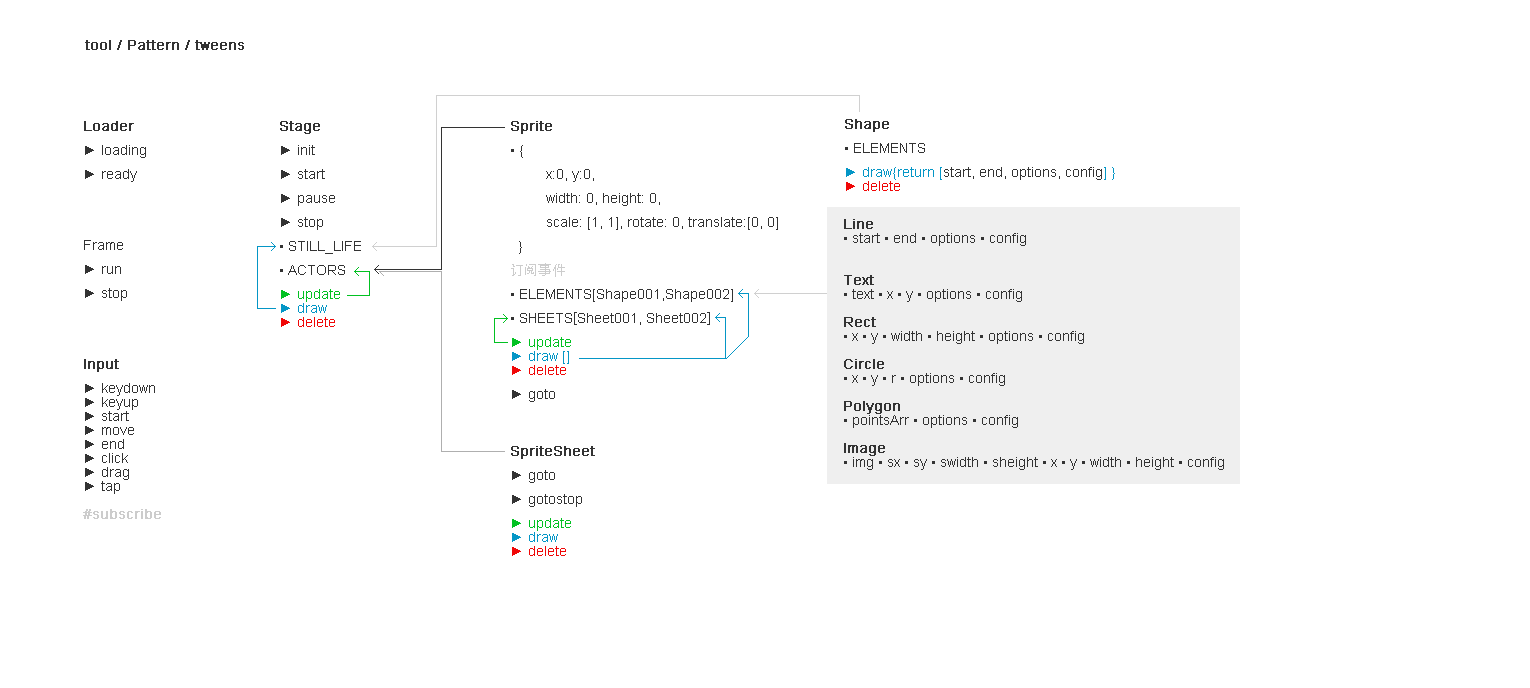
<style>
.page{position:relative;width:1530px;height:688px;background:#ffffff}
.page>*{position:absolute;margin:0}
.t1{font:14px "ArialMT";color:#333333;font-weight:bold}
.t2{font:14px/24px "ArialMT";color:#333333}
.t3{font:14px/24px "ArialMT";color:#333333;font-weight:bold}
.t4{font:14px/16px "ArialMT";color:#333333}
.t5{font:14px/14px "ArialMT";color:#02c122}
.t6{font:14px/14px "ArialMT";color:#0496c6}
.t7{font:14px/14px "ArialMT";color:#f00707}
.t8{font:14px/24px "AdobeHeitiStd-Regular";color:#cccccc}
.t9{font:14px/24px "AdobeHeitiStd-Regular";color:#333333}
.t10{font:14px/24px "ArialMT";color:#f00707}
.t11{font:14px/14px "ArialMT";color:#333333}
.t12{font:14px/14px "ArialMT";color:#333333;font-weight:bold}
.t13{font:14px/14px "ArialMT";color:#cccccc;font-weight:bold}
</style>
<div class="page">
<p class="t1" style="left:85px;top:40px;width:159px;height:10px">tool / Pattern / tweens</p>
<p class="t2" style="left:84px;top:121px;width:62px;height:61px"><span class="t3">Loader<br></span><span class="t4">► </span>loading<br>► ready</p>
<p class="t2" style="left:280px;top:121px;width:81px;height:206px"><span class="t3">Stage<br></span>► init<br>► start<br>► pause<br>► stop<br>• STILL_LIFE<br>• ACTORS<br><span class="t5">► update<br></span><span class="t6">► draw<br></span><span class="t7">► delete</span></p>
<p class="t2" style="left:511px;top:121px;width:267px;height:281px"><span class="t3">Sprite<br></span><span class="t4">• </span>{<br> x:0, y:0, <br> width: 0, height: 0, <br> scale: [1, 1], rotate: 0, translate:[0, 0]<br>  }<br><span class="t8">订阅事件<br></span>• ELEMENTS[Shape001,Shape002]<br>• SHEETS<span class="t9">[</span>Sheet001, Sheet002<span class="t9">]<br></span><span class="t5">► update<br></span><span class="t6">► draw []<br></span><span class="t10">► delete<br></span>► goto</p>
<p class="t11" style="left:845px;top:119px;width:270px;height:72px"><span class="t3">Shape<br></span><span class="t2">• ELEMENTS<br></span><span class="t6">► draw{return [</span>start, end, options, config<span class="t6">] }<br></span><span class="t7">► delete</span></p>
<p class="t11" style="left:844px;top:219px;width:380px;height:251px"><span class="t12">Line<br></span>• start • end • options • config<br><br><span class="t12"><br>Text<br></span>• text • x • y • options • config<br><span class="t12"><br>Rect<br></span>• x • y • width • height • options • config<br><span class="t12"><br>Circle<br></span>• x • y • r • options • config <br><span class="t12"><br>Polygon<br></span>• pointsArr • options • config <br><br><span class="t12">Image<br></span>• img • sx • sy • swidth • sheight • x • y • width • height • config</p>
<p class="t2" style="left:84px;top:240px;width:43px;height:61px">Frame<br>► run<br><span class="t4">► stop</span></p>
<p class="t11" style="left:83px;top:359px;width:78px;height:160px"><span class="t3">Input<br></span>► keydown<br>► keyup<br>► start<br>► move<br>► end<br>► click<br>► drag<br>► tap<br><br><span class="t13">#subscribe</span></p>
<p class="t2" style="left:511px;top:446px;width:84px;height:110px"><span class="t3">SpriteSheet<br></span>► goto<br>► gotostop<br><span class="t5">► update<br></span><span class="t6">► draw<br></span><span class="t7">► delete</span></p>
</div>
